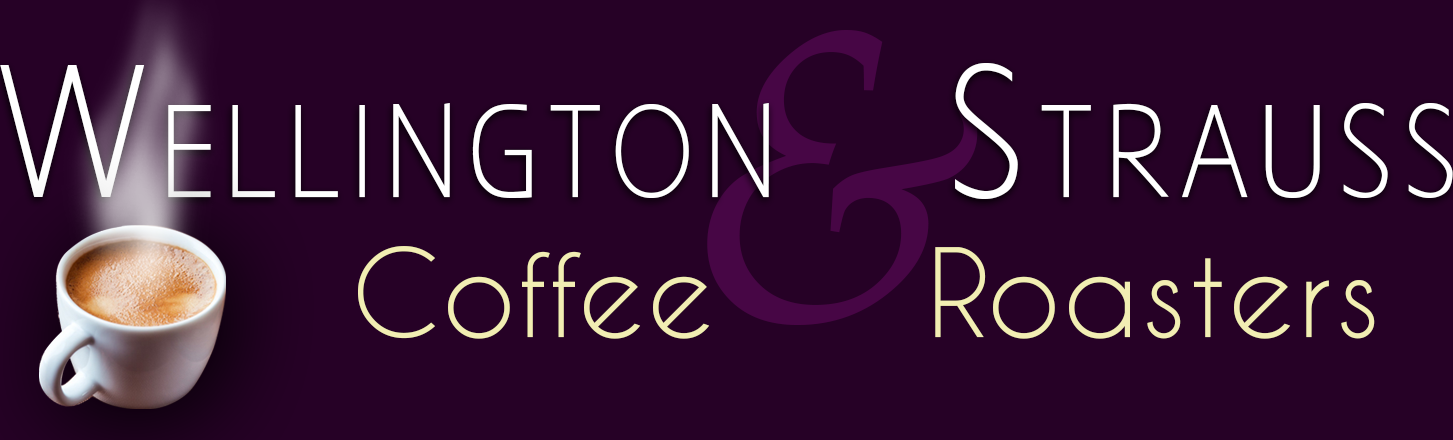
<style>
.page{position:relative;width:1453px;height:440px;background:#260126}
.page>*{position:absolute;margin:0}
.t1{font:165px "AaarghNormal";letter-spacing:0.06em;color:#ffffff;font-variant:small-caps;scale:0.91 1}
.t2{font:115px "CaviarDreams";letter-spacing:0.02em;color:#f2eeb3}
</style>
<div class="page">
<p class="t1" style="left:0px;top:63px;width:1453px;height:136px">Wellington  Strauss</p>
<p class="t2" style="left:358px;top:246px;width:1017px;height:93px">Coffee      Roasters</p>
</div>
